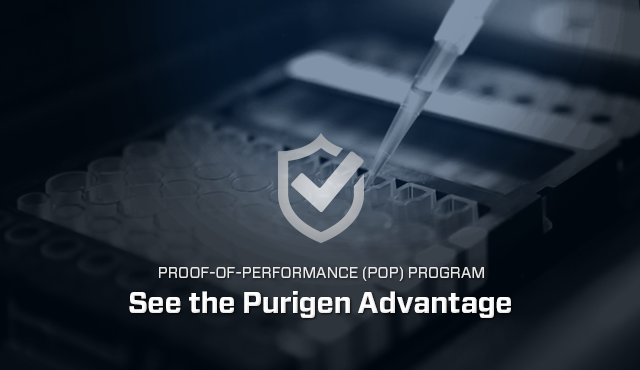
<style>
.page{position:relative;width:640px;height:370px}
.page>*{position:absolute;margin:0}
.t1{font:16px "Forza-Book";letter-spacing:-0.01em;color:#e8e9e9;text-transform:uppercase}
.t2{font:29.3px "Forza-Bold";letter-spacing:-0.01em;color:#fefefe}
</style>
<div class="page">
<p class="t1" style="left:159px;top:266px;width:325px;height:15px">Proof-of-Performance (POP) Program</p>
<p class="t2" style="left:129px;top:291px;width:382px;height:27px">See the Purigen Advantage</p>
</div>
